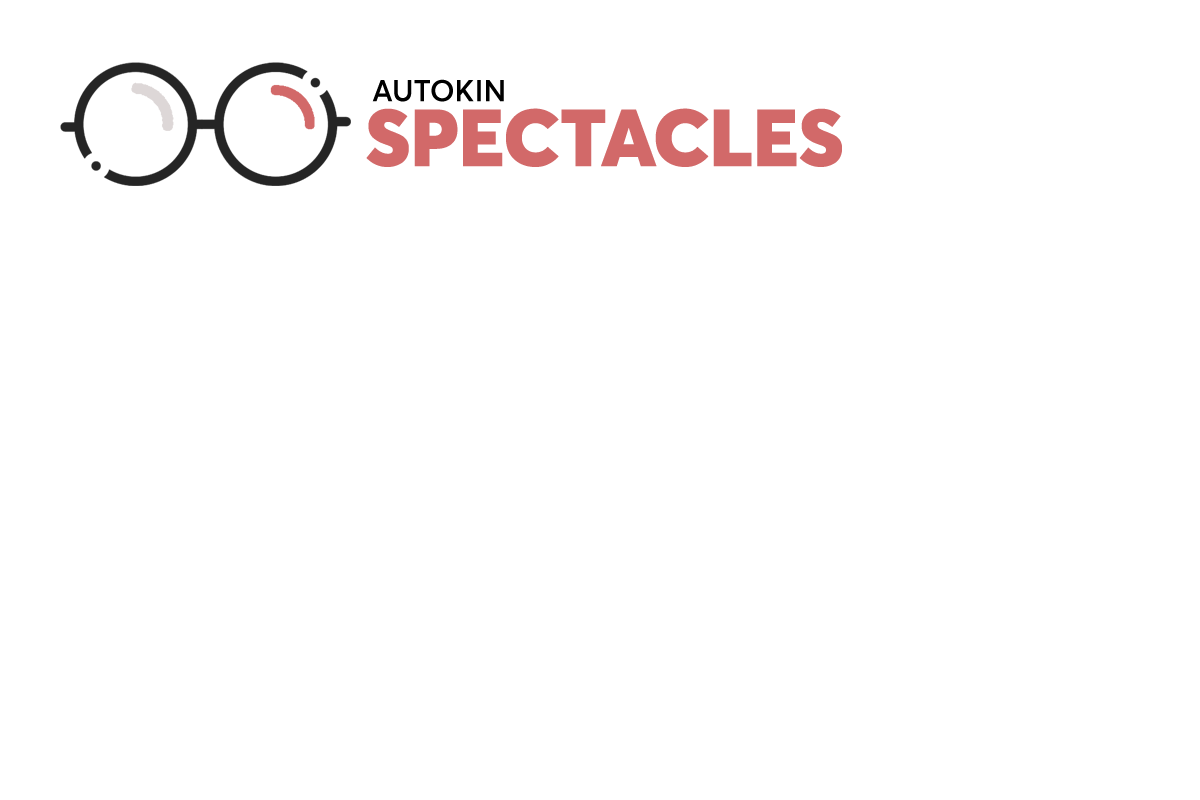
<style>
.page{position:relative;width:1200px;height:800px;background:#ffffff}
.page>*{position:absolute;margin:0}
.t1{font:30px "Averta-Semibold";color:#000000}
.t2{font:80px "Averta-Black";color:#d26969}
</style>
<div class="page">
<p class="t1" style="left:372px;top:79px;width:132px;height:23px">AUTOKIN</p>
<p class="t2" style="left:366px;top:108px;width:476px;height:59px">SPECTACLES</p>
</div>
